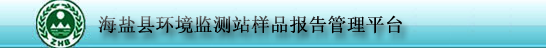
<style>
.page{position:relative;width:546px;height:48px}
.page>*{position:absolute;margin:0}
.t1{font:18.7px "SimSun";color:#000000;font-weight:bold}
</style>
<div class="page">
<p class="t1" style="left:98px;top:15px;width:304px;height:19px">海盐县环境监测站样品报告管理平台</p>
</div>
